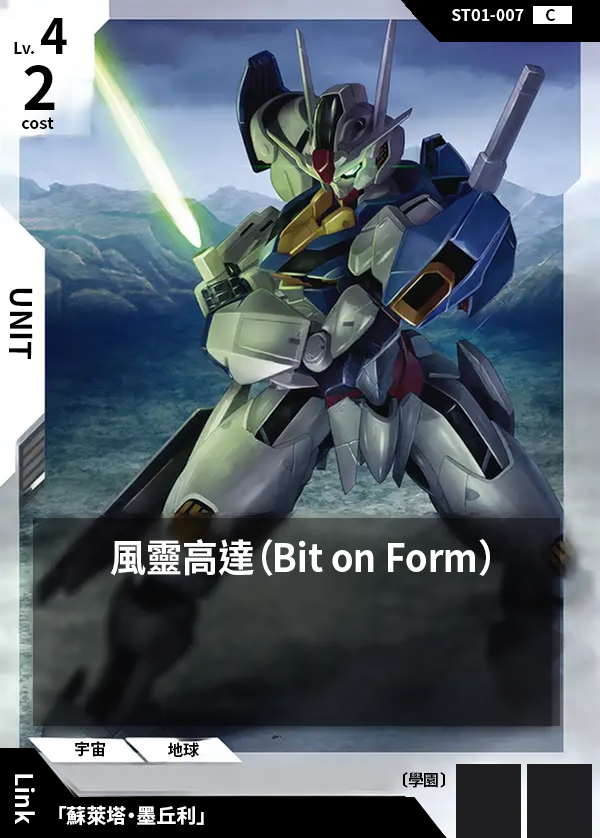
<style>
.page{position:relative;width:600px;height:838px}
.page>*{position:absolute;margin:0}
.t1{font:16px "NotoSansCJKtc-Bold";color:#ffffff}
.t2{font:16px "NotoSansCJKtc-Bold";color:#000000}
.t3{font:48px "NotoSansCJKtc-Bold";color:#000000}
.t4{font:60px "NotoSansCJKtc-Bold";color:#000000}
.t5{font:30px "NotoSansCJKtc-Bold";color:#000000}
.t6{font:38.4px "NotoSansCJKtc-Bold";color:#ffffff;scale:0.94 1}
.t7{font:24px "NotoSansCJKtc-Bold";color:#ffffff}
.t8{font:20px "NotoSansCJKtc-Bold";color:#ffffff}
</style>
<div class="page">
<p class="t1" style="left:452px;top:9px;width:72px;height:12px">ST01-007</p>
<p class="t2" style="left:546px;top:9px;width:10px;height:12px">C</p>
<p class="t3" style="left:41px;top:18px;width:26px;height:36px">4</p>
<p class="t2" style="left:14px;top:42px;width:20px;height:12px">Lv.</p>
<p class="t4" style="left:24px;top:65px;width:31px;height:45px">2</p>
<p class="t2" style="left:22px;top:117px;width:32px;height:12px">cost</p>
<p class="t5" style="left:9px;top:288px;width:24px;height:71px;rotate:90deg">UNIT</p>
<p class="t6" style="left:110px;top:539px;width:380px;height:37px">風靈高達（Bit on Form）</p>
<p class="t2" style="left:75px;top:741px;width:30px;height:16px">宇宙</p>
<p class="t2" style="left:168px;top:742px;width:31px;height:15px">地球</p>
<p class="t7" style="left:15px;top:774px;width:20px;height:50px;rotate:90deg">Link</p>
<p class="t2" style="left:403px;top:772px;width:42px;height:16px">〔學園〕</p>
<p class="t8" style="left:59px;top:805px;width:145px;height:21px">「蘇萊塔・墨丘利」</p>
</div>
